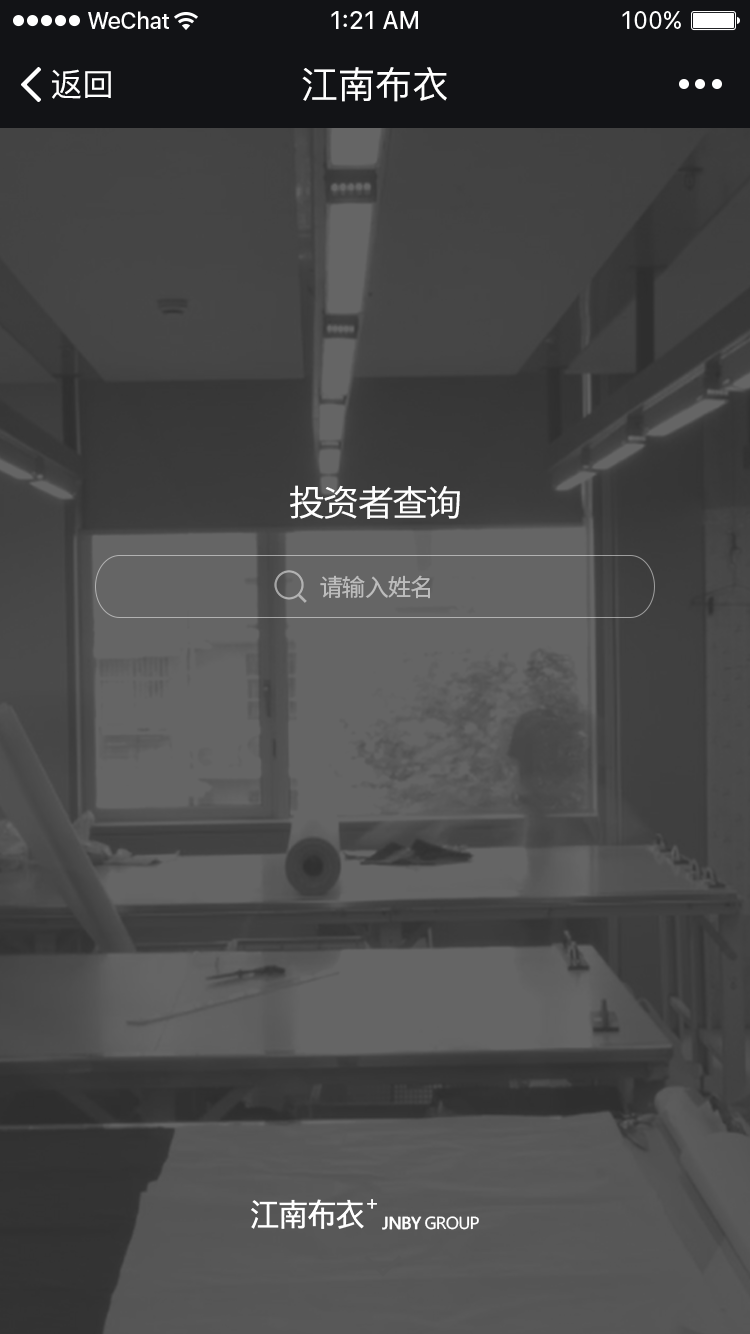
<style>
.page{position:relative;width:750px;height:1334px}
.page>*{position:absolute;margin:0}
.t1{font:32px "PingFang-SC-Medium";color:#ffffff}
.t2{font:37px "PingFang-SC-Medium";color:#ffffff}
.t3{font:36px "SourceHanSansCN-Regular";letter-spacing:-0.05em;color:#ffffff;text-transform:uppercase}
.t4{font:24px "SourceHanSansCN-Regular";letter-spacing:-0.05em;color:#bcbcbc;text-transform:uppercase}
.t5{font:16.2px "MicrosoftYaHei";letter-spacing:-0.05em;color:#ffffff;text-transform:uppercase}
.t6{font:16.2px "MicrosoftYaHei";letter-spacing:-0.05em;color:#ffffff;text-transform:uppercase;font-weight:bold}
</style>
<div class="page">
<p class="t1" style="left:52px;top:69px;width:59px;height:30px">返回</p>
<p class="t2" style="left:302px;top:67px;width:145px;height:35px">江南布衣</p>
<p class="t3" style="left:290px;top:485px;width:170px;height:34px">投资者查询</p>
<p class="t4" style="left:320px;top:575px;width:110px;height:24px">请输入姓名</p>
<p class="t5" style="left:382px;top:1216px;width:97px;height:14px"><span class="t6">JNBY</span> GROUP</p>
</div>
